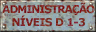
<style>
.page{position:relative;width:96px;height:32px}
.page>*{position:absolute;margin:0}
.t1{font:10.5px/13px "Verdana-Bold";letter-spacing:-0.08em}
.t2{font:10.5px/13px "Verdana-Bold";letter-spacing:-0.04em}
</style>
<div class="page">
<p class="t1" style="left:2px;top:2px;width:93px;height:25px;text-align:center">ADMINISTRAÇÃO<br><span class="t2">NÍVEIS D 1-3</span></p>
</div>
